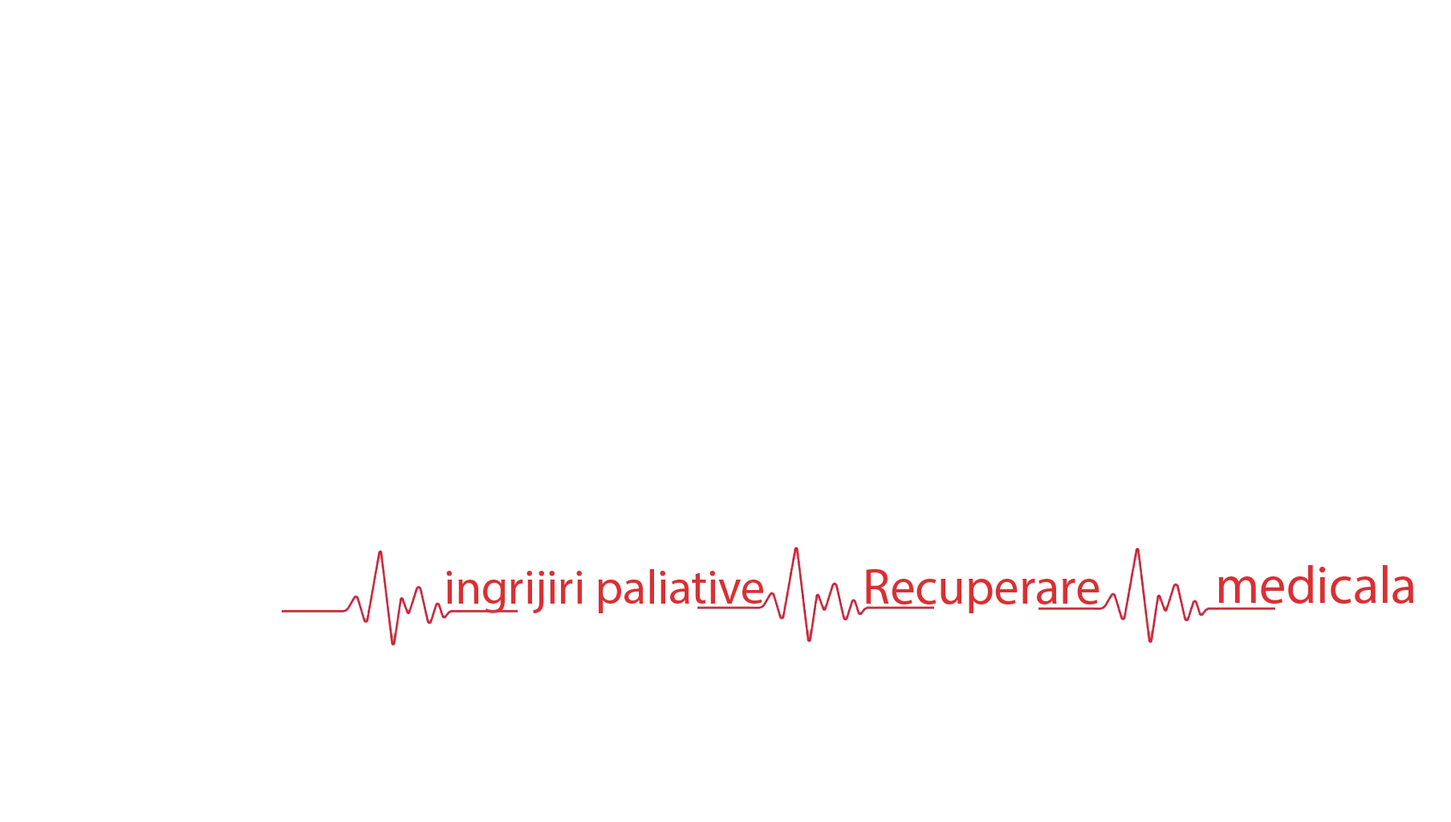
<style>
.page{position:relative;width:1451px;height:822px;background:#ffffff}
.page>*{position:absolute;margin:0}
.t1{font:48px "MyriadPro-Regular";color:#d93034}
.t2{font:50.4px "MyriadPro-Regular";color:#d93034}
.t3{font:53.4px "MyriadPro-Regular";color:#d93034}
</style>
<div class="page">
<p class="t1" style="left:446px;top:569px;width:317px;height:44px">ingrijiri paliative</p>
<p class="t2" style="left:866px;top:569px;width:233px;height:44px">Recuperare</p>
<p class="t3" style="left:1218px;top:565px;width:196px;height:39px">medicala</p>
</div>
